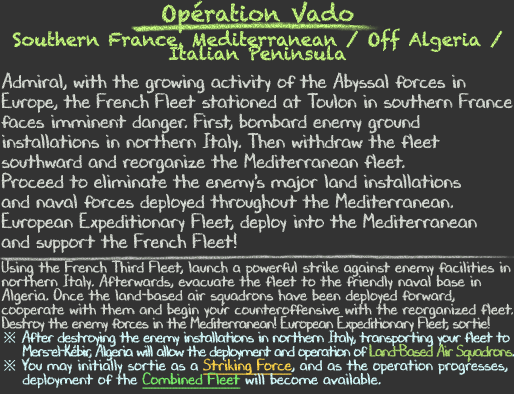
<style>
.page{position:relative;width:514px;height:394px;background:#333333}
.page>*{position:absolute;margin:0}
.t1{font:18px/14px "Chalkduster";color:#bcec77}
.t2{font:22px/28px "Chalkduster";color:#bcec77}
.t3{font:20px/20px "DJBChalkItUp";color:#d9ded6}
.t4{font:20px/12px "DJBChalkItUp";color:#d9ded6}
.t5{font:16px/14px "DJBChalkItUp";color:#d9ded6}
.t6{font:16px/14px "DJBChalkItUp";letter-spacing:-0.04em;color:#d9ded6}
.t7{font:16px/14px "TimesNewRomanPSMT";color:#d7feff}
.t8{font:16px/14px "DJBChalkItUp";letter-spacing:-0.04em;color:#d7feff}
.t9{font:16px/14px "DJBChalkItUp";letter-spacing:-0.06em;color:#d7feff}
.t10{font:16px/14px "DJBChalkItUp";letter-spacing:-0.06em;color:#addc6e}
.t11{font:16px/14px "DJBChalkItUp";color:#d7feff}
.t12{font:16px/14px "DJBChalkItUp";color:#ffd649;text-decoration:underline}
.t13{font:16px/14px "DJBChalkItUp";color:#7bf26b;text-decoration:underline}
</style>
<div class="page">
<p class="t1" style="left:12px;top:0px;width:491px;height:61px;text-align:center"><span class="t2">Opération Vado<br></span>Southern France, Mediterranean / Off Algeria /<br>Italian Peninsula</p>
<p class="t3" style="left:1px;top:72px;width:514px;height:317px">Admiral, with the growing activity of the Abyssal forces in<br>Europe, the French Fleet stationed at Toulon in southern France<br>faces imminent danger. First, bombard enemy ground<br>installations in northern Italy. Then withdraw the fleet<br>southward and reorganize the Mediterranean fleet.<br>Proceed to eliminate the enemy's major land installations<br>and naval forces deployed throughout the Mediterranean.<br>European Expeditionary Fleet, deploy into the Mediterranean<br><span class="t4">and support the French Fleet!<br><br></span><span class="t5">Using the French Third Fleet, launch a powerful strike against enemy facilities in<br>northern Italy. Afterwards, evacuate the fleet to the friendly naval base in<br>Algeria. Once the land-based air squadrons have been deployed forward,<br>cooperate with them and begin your counteroffensive with the reorganized fleet.<br></span><span class="t6">Destroy the enemy forces in the Mediterranean! European Expeditionary Fleet, sortie!<br></span><span class="t7">※ </span><span class="t8">After destroying the enemy installations in northern Italy, transporting your fleet to<br>　 </span><span class="t9">Mers-el-Kébir, Algeria will allow the deployment and operation of </span><span class="t10">Land-Based Air Squadrons</span><span class="t9">.<br></span><span class="t7">※ </span><span class="t11">You may initially sortie as a </span><span class="t12">Striking Force</span><span class="t11">, and as the operation progresses,<br>　 deployment of the </span><span class="t13">Combined Fleet</span><span class="t11"> will become available.</span></p>
</div>
